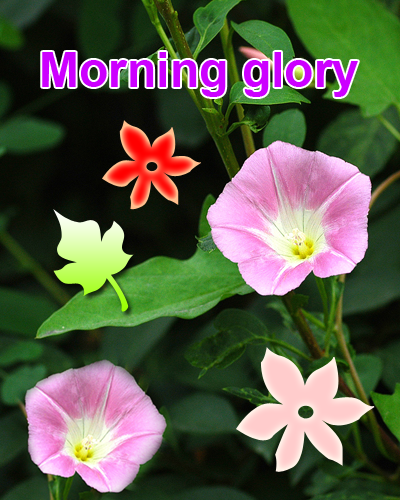
<style>
.page{position:relative;width:400px;height:500px}
.page>*{position:absolute;margin:0}
.t1{font:48px "Arial-BoldMT";color:#cc00ff}
</style>
<div class="page">
<p class="t1" style="left:42px;top:52px;width:316px;height:45px">Morning glory</p>
</div>
